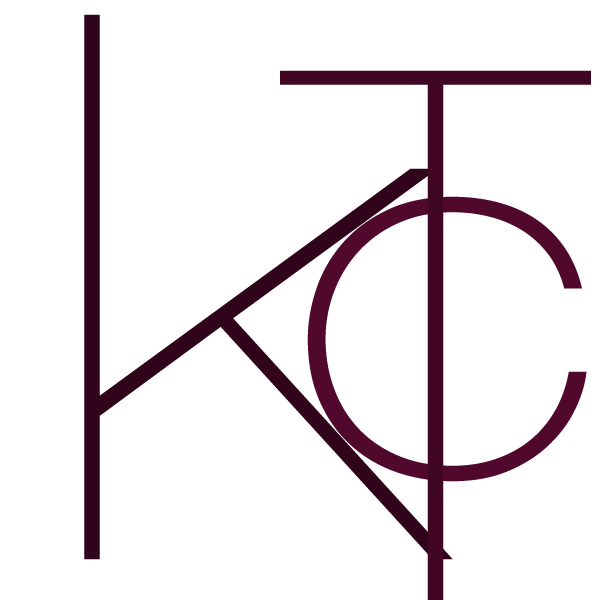
<style>
.page{position:relative;width:600px;height:600px;background:#ffffff}
.page>*{position:absolute;margin:0}
.t1{font:762px "HelveticaNeueLTCom-UltLtEx";color:#30041b}
.t2{font:381px "HelveticaNeueLTCom-ThEx";color:#51082d}
</style>
<div class="page">
<p class="t1" style="left:84px;top:14px;width:369px;height:546px">k</p>
<p class="t2" style="left:307px;top:196px;width:280px;height:286px">C</p>
</div>
